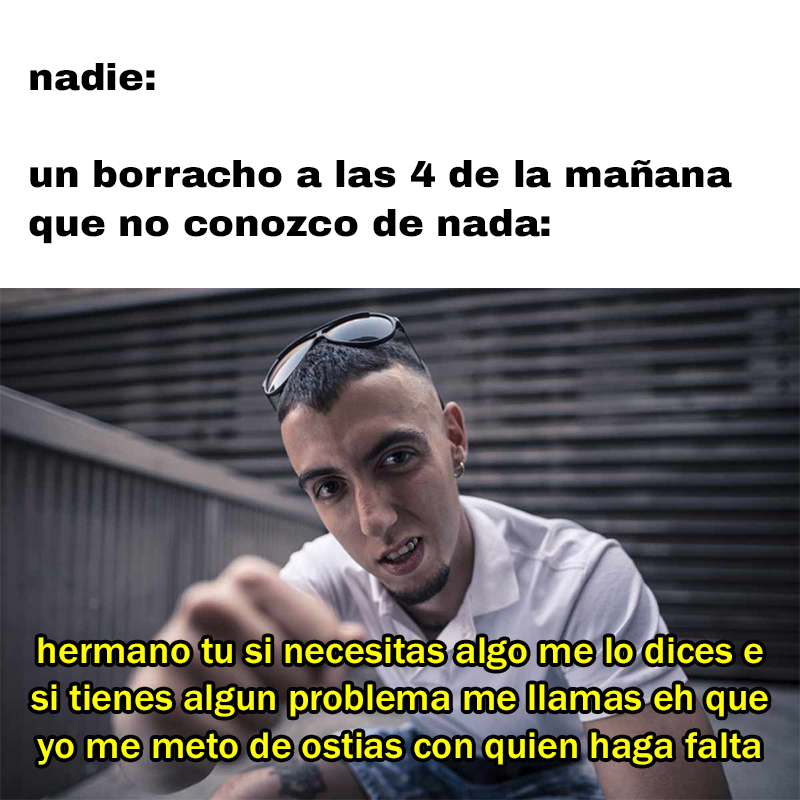
<style>
.page{position:relative;width:800px;height:800px;background:#ffffff}
.page>*{position:absolute;margin:0}
.t1{font:37.1px "ArchivoBlack-Regular";color:#000000;scale:1.04 1}
.t2{font:38.3px "FranklinGothic-Medium";color:#ffff00;scale:1.04 1}
</style>
<div class="page">
<p class="t1" style="left:29px;top:63px;width:703px;height:181px">nadie:<br>un borracho a las 4 de la mañana<br>que no conozco de nada:</p>
<p class="t2" style="left:31px;top:637px;width:737px;height:128px;text-align:center">hermano tu si necesitas algo me lo dices e<br>si tienes algun problema me llamas eh que<br>yo me meto de ostias con quien haga falta</p>
</div>
